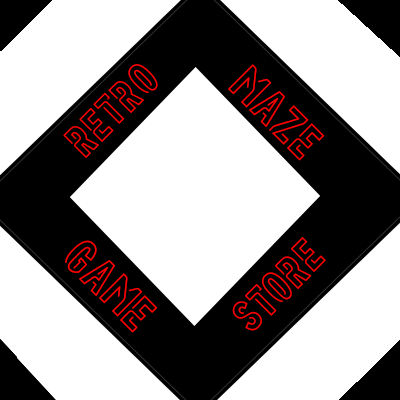
<style>
.page{position:relative;width:400px;height:400px;background:#ffffff}
.page>*{position:absolute;margin:0}
.t1{font:43.7px "Neoneon";color:#ff0000}
.t2{font:41px "Neoneon";color:#ff0000}
</style>
<div class="page">
<p class="t1" style="left:228px;top:64px;width:97px;height:97px;rotate:45deg">maze</p>
<p class="t1" style="left:65px;top:240px;width:93px;height:93px;rotate:45deg">game</p>
<p class="t2" style="left:232px;top:237px;width:94px;height:94px;rotate:-45deg">store</p>
</div>
